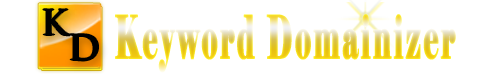
<style>
.page{position:relative;width:500px;height:75px;background:#ffffff}
.page>*{position:absolute;margin:0}
.t1{font:34.1px "TrajanPro-Bold";color:#000000}
.t2{font:100.3px "Elephant-Regular";letter-spacing:0.075em;font-weight:bold;scale:0.47 1}
</style>
<div class="page">
<p class="t1" style="left:43px;top:9px;width:28px;height:27px">K</p>
<p class="t2" style="left:115px;top:14px;width:341px;height:59px">Keyword Domainizer</p>
<p class="t1" style="left:70px;top:34px;width:28px;height:27px">D</p>
</div>
